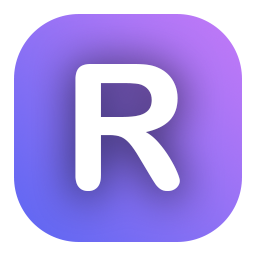
<style>
.page{position:relative;width:256px;height:256px;background:#ffffff}
.page>*{position:absolute;margin:0}
.t1{font:175px "ArialRoundedMTBold";color:#ffffff}
</style>
<div class="page">
<p class="t1" style="left:75px;top:64px;width:105px;height:127px">R</p>
</div>
